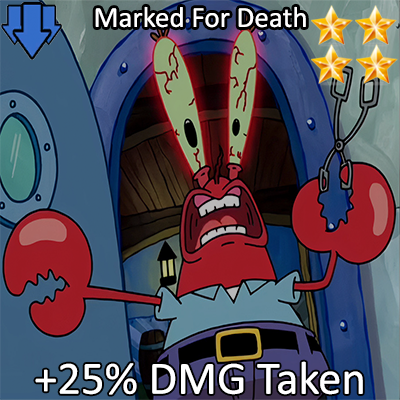
<style>
.page{position:relative;width:400px;height:400px}
.page>*{position:absolute;margin:0}
.t1{font:50px "Calibri";color:#ffffff}
.t2{font:80px "Calibri";color:#ffffff}
</style>
<div class="page">
<p class="t1" style="left:95px;top:6px;width:211px;height:22px">Marked For Death</p>
<p class="t2" style="left:35px;top:361px;width:328px;height:34px">+25% DMG Taken</p>
</div>
